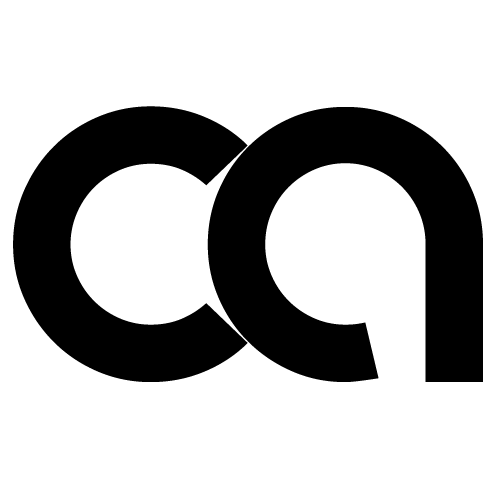
<style>
.page{position:relative;width:500px;height:500px;background:#ffffff}
.page>*{position:absolute;margin:0}
.t1{font:550px "JKAbode-Demo";letter-spacing:-0.121em;color:#000000}
</style>
<div class="page">
<p class="t1" style="left:13px;top:106px;width:470px;height:276px">Ca</p>
</div>
